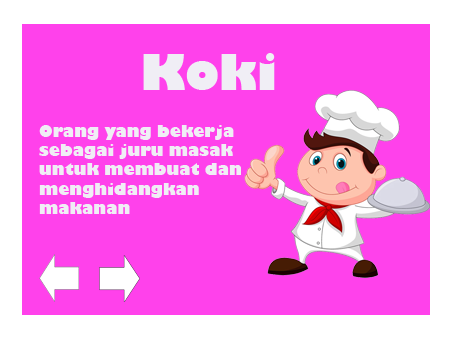
<style>
.page{position:relative;width:454px;height:340px;background:#ff41eb}
.page>*{position:absolute;margin:0}
.t1{font:48px "GillSans-UltraBold";color:#f0eef5}
.t2{font:16px "GillSans-UltraBold";color:#f0eef5}
</style>
<div class="page">
<p class="t1" style="left:143px;top:53px;width:132px;height:37px">Koki</p>
<p class="t2" style="left:39px;top:125px;width:202px;height:89px">Orang yang bekerja <br>sebagai juru masak<br>untuk membuat dan<br>menghidangkan <br>makanan</p>
</div>
